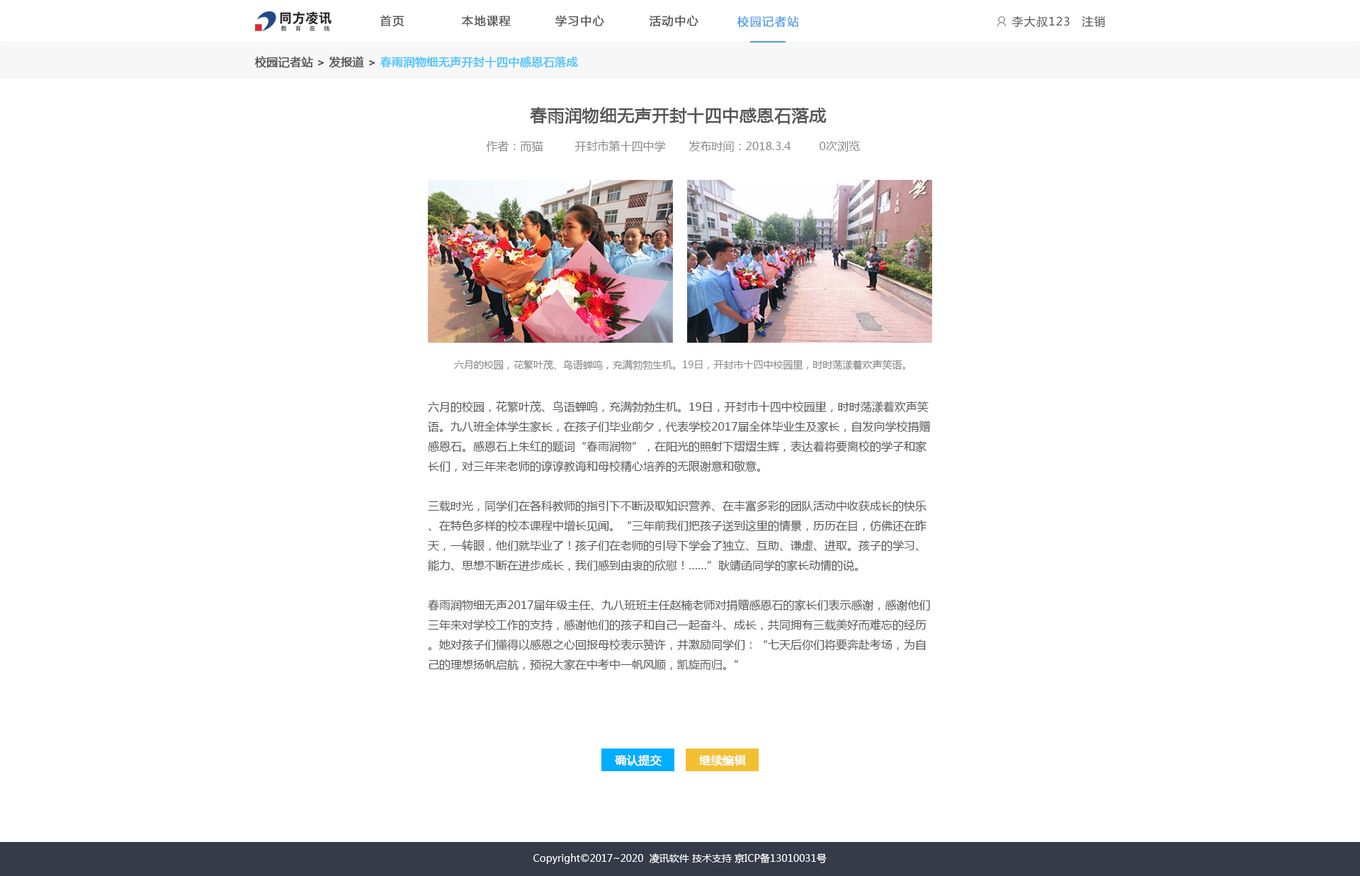
<style>
.page{position:relative;width:1360px;height:876px;background:#ffffff}
.page>*{position:absolute;margin:0}
.t1{font:11.3px "MicrosoftYaHei";letter-spacing:0.075em;color:#555555;font-weight:bold}
.t2{font:11.3px "MicrosoftYaHei";letter-spacing:0.075em;color:#54a0e6;font-weight:bold}
.t3{font:11.3px "MicrosoftYaHei";letter-spacing:0.075em;color:#555555}
.t4{font:11.3px "MicrosoftYaHei";color:#4dc4fc;font-weight:bold}
.t5{font:11.3px "MicrosoftYaHei";color:#555555;font-weight:bold}
.t6{font:17px "MicrosoftYaHei";color:#555555;font-weight:bold}
.t7{font:11.3px "MicrosoftYaHei";color:#8a8a8a}
.t8{font:9.9px "MicrosoftYaHei";color:#8a8a8a}
.t9{font:11.3px "MicrosoftYaHei";color:#555555}
.t10{font:11.3px "MicrosoftYaHei";color:#ffffff;font-weight:bold}
.t11{font:9.9px "MicrosoftYaHei";color:#ffffff}
</style>
<div class="page">
<p class="t1" style="left:380px;top:15px;width:24px;height:12px">首页</p>
<p class="t1" style="left:462px;top:15px;width:49px;height:12px">本地课程</p>
<p class="t1" style="left:556px;top:15px;width:48px;height:12px">学习中心</p>
<p class="t1" style="left:650px;top:15px;width:49px;height:12px">活动中心</p>
<p class="t2" style="left:738px;top:16px;width:61px;height:12px">校园记者站</p>
<p class="t3" style="left:1012px;top:16px;width:58px;height:12px">李大叔123</p>
<p class="t3" style="left:1082px;top:16px;width:23px;height:11px">注销</p>
<p class="t4" style="left:255px;top:56px;width:323px;height:12px"><span class="t5">校园记者站 &gt; 发报道 &gt;</span> 春雨润物细无声开封十四中感恩石落成</p>
<p class="t6" style="left:530px;top:107px;width:297px;height:18px">春雨润物细无声开封十四中感恩石落成</p>
<p class="t7" style="left:486px;top:140px;width:57px;height:12px">作者：而猫</p>
<p class="t7" style="left:575px;top:140px;width:91px;height:12px">开封市第十四中学</p>
<p class="t7" style="left:689px;top:141px;width:102px;height:11px">发布时间：2018.3.4</p>
<p class="t7" style="left:820px;top:141px;width:40px;height:11px">0次浏览</p>
<p class="t8" style="left:454px;top:360px;width:452px;height:11px">六月的校园，花繁叶茂、鸟语蝉鸣，充满勃勃生机。19日，开封市十四中校园里，时时荡漾着欢声笑语。</p>
<p class="t9" style="left:428px;top:401px;width:502px;height:270px">六月的校园，花繁叶茂、鸟语蝉鸣，充满勃勃生机。19日，开封市十四中校园里，时时荡漾着欢声笑语。九八班全体学生家长，在孩子们毕业前夕，代表学校2017届全体毕业生及家长，自发向学校捐赠感恩石。感恩石上朱红的题词“春雨润物”，在阳光的照射下熠熠生辉，表达着将要离校的学子和家长们，对三年来老师的谆谆教诲和母校精心培养的无限谢意和敬意。<br><br>三载时光，同学们在各科教师的指引下不断汲取知识营养、在丰富多彩的团队活动中收获成长的快乐、在特色多样的校本课程中增长见闻。“三年前我们把孩子送到这里的情景，历历在目，仿佛还在昨天，一转眼，他们就毕业了！孩子们在老师的引导下学会了独立、互助、谦虚、进取。孩子的学习、能力、思想不断在进步成长，我们感到由衷的欣慰！……”耿靖函同学的家长动情的说。<br><br>春雨润物细无声2017届年级主任、九八班班主任赵楠老师对捐赠感恩石的家长们表示感谢，感谢他们三年来对学校工作的支持，感谢他们的孩子和自己一起奋斗、成长，共同拥有三载美好而难忘的经历。她对孩子们懂得以感恩之心回报母校表示赞许，并激励同学们：“七天后你们将要奔赴考场，为自己的理想扬帆启航，预祝大家在中考中一帆风顺，凯旋而归。”</p>
<p class="t10" style="left:615px;top:755px;width:47px;height:12px">确认提交</p>
<p class="t10" style="left:699px;top:755px;width:47px;height:12px">继续编辑</p>
<p class="t11" style="left:534px;top:853px;width:293px;height:11px">Copyright©2017~2020  凌讯软件 技术支持 京ICP备13010031号</p>
</div>
